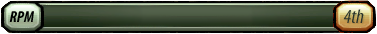
<style>
.page{position:relative;width:377px;height:34px}
.page>*{position:absolute;margin:0}
.t1{font:16px "MyriadPro-BoldCondIt";color:#000000}
.t2{font:20px "MyriadPro-CondIt"}
.t3{font:20px "MyriadPro-CondIt";color:#27312a}
</style>
<div class="page">
<p class="t1" style="left:9px;top:11px;width:25px;height:11px">RPM</p>
<p class="t2" style="left:343px;top:9px;width:22px;height:15px">3rd</p>
<p class="t3" style="left:343px;top:9px;width:21px;height:14px">4th</p>
</div>
